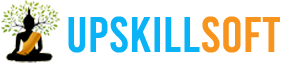
<style>
.page{position:relative;width:292px;height:63px;background:#ffffff}
.page>*{position:absolute;margin:0}
.t1{font:50px "Bebas-Regular";color:#0ab3f6}
.t2{font:50px "Bebas-Regular";color:#f7941d}
</style>
<div class="page">
<p class="t1" style="left:68px;top:16px;width:212px;height:37px">UPSKILL<span class="t2">SOFT</span></p>
</div>
